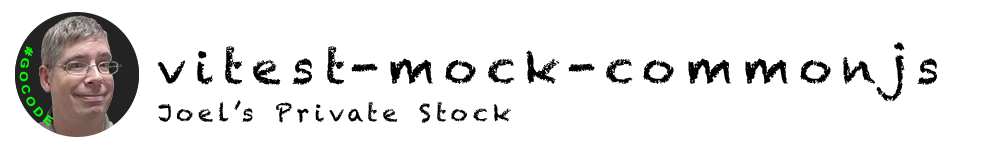
<style>
.page{position:relative;width:1000px;height:150px;background:#ffffff}
.page>*{position:absolute;margin:0}
.t1{font:11.2px "Arial-BoldMT";letter-spacing:0.2em;color:#00ff00}
.t2{font:46px "Chalkduster";letter-spacing:0.2em;color:#000000}
.t3{font:24px "Chalkduster";letter-spacing:0.2em;color:#000000}
</style>
<div class="page">
<p class="t1" style="left:19px;top:46px;width:35px;height:80px;rotate:72deg">#GOCODE</p>
<p class="t2" style="left:158px;top:42px;width:779px;height:60px">vitest-mock-commonjs</p>
<p class="t3" style="left:158px;top:100px;width:353px;height:23px">Joel’s Private Stock</p>
</div>
